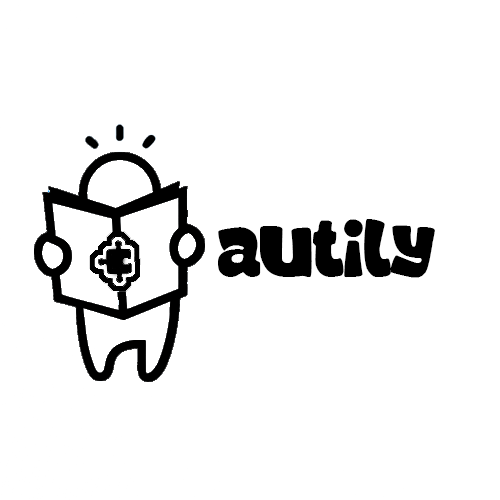
<style>
.page{position:relative;width:500px;height:500px;background:#ffffff}
.page>*{position:absolute;margin:0}
.t1{font:72.2px "DaddyCartoon";color:#000000}
</style>
<div class="page">
<p class="t1" style="left:218px;top:219px;width:217px;height:59px">AUTILY</p>
</div>
